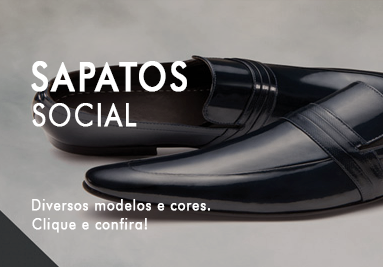
<style>
.page{position:relative;width:383px;height:267px}
.page>*{position:absolute;margin:0}
.t1{font:40px "FuturaBT-Medium";letter-spacing:0.05em;color:#ffffff;font-weight:bold;scale:0.85 1}
.t2{font:32px "FuturaBT-Book";letter-spacing:0.05em;color:#ffffff;font-weight:bold;scale:0.85 1}
.t3{font:16px "FuturaBT-Book";letter-spacing:0.05em;color:#ffffff;font-weight:bold;scale:0.85 1}
</style>
<div class="page">
<p class="t1" style="left:31px;top:61px;width:156px;height:31px">SAPATOS</p>
<p class="t2" style="left:32px;top:103px;width:105px;height:24px">SOCIAL</p>
<p class="t3" style="left:32px;top:199px;width:178px;height:12px">Diversos modelos e cores.</p>
<p class="t3" style="left:32px;top:218px;width:115px;height:15px">Clique e confira!</p>
<p class="t3" style="left:32px;top:218px;width:115px;height:15px">Clique e confira!</p>
<p class="t3" style="left:32px;top:218px;width:115px;height:15px">Clique e confira!</p>
</div>
